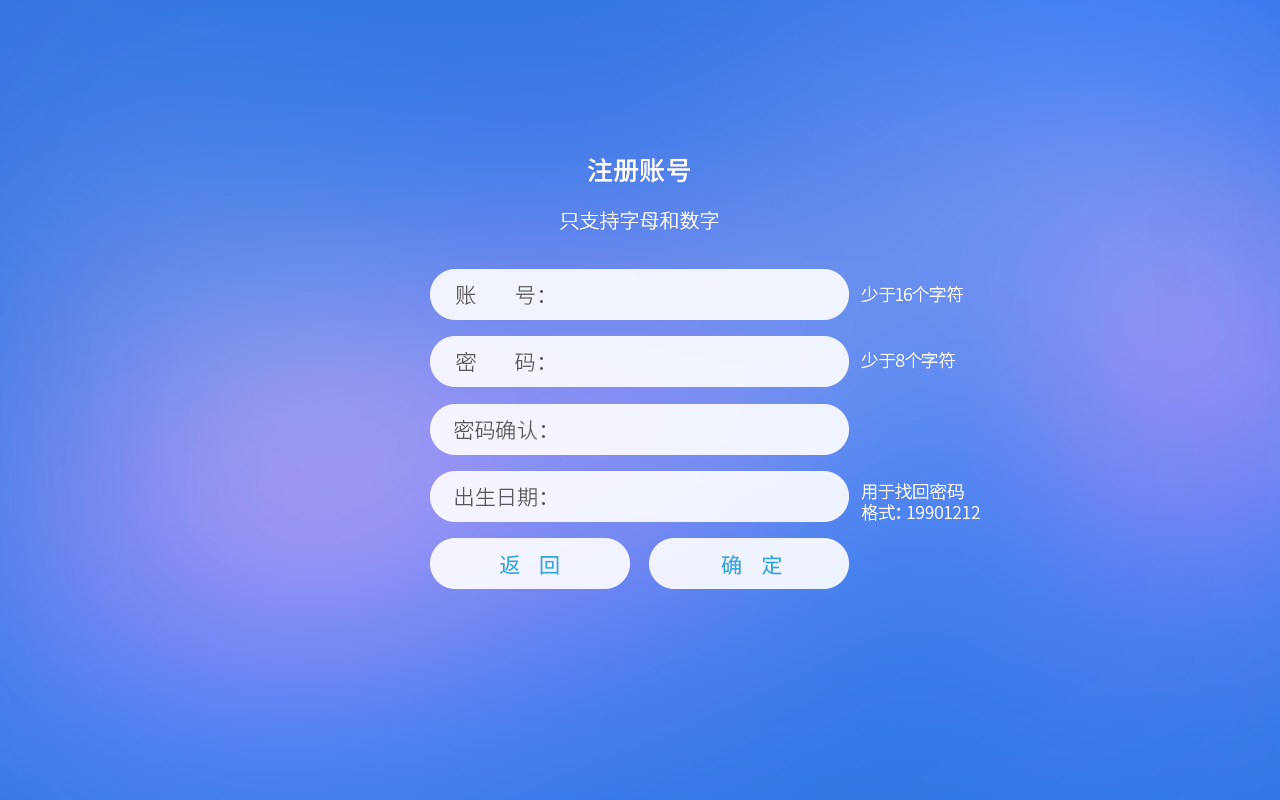
<style>
.page{position:relative;width:1280px;height:800px}
.page>*{position:absolute;margin:0}
.t1{font:20px "SourceHanSansCN-Light";color:#ffffff}
.t2{font:26.2px "SourceHanSansCN-Medium";color:#ffffff}
.t3{font:21.2px "SourceHanSansCN-Light";color:#595757}
.t4{font:17.5px "SourceHanSansCN-Light";color:#ffffff}
.t5{font:21.2px "SourceHanSansCN-Regular";color:#2ea7e0}
</style>
<div class="page">
<p class="t1" style="left:560px;top:158px;width:159px;height:72px;text-align:center"><span class="t2">注册账号<br><br></span>只支持字母和数字</p>
<p class="t3" style="left:456px;top:285px;width:87px;height:20px">账        号：</p>
<p class="t4" style="left:861px;top:286px;width:102px;height:17px">少于16个字符</p>
<p class="t3" style="left:456px;top:351px;width:87px;height:21px">密        码：</p>
<p class="t4" style="left:861px;top:352px;width:94px;height:17px">少于8个字符</p>
<p class="t3" style="left:454px;top:419px;width:91px;height:21px">密码确认：</p>
<p class="t4" style="left:861px;top:483px;width:119px;height:38px">用于找回密码<br>格式：19901212</p>
<p class="t3" style="left:455px;top:487px;width:90px;height:20px">出生日期：</p>
<p class="t5" style="left:500px;top:555px;width:59px;height:20px">返    回</p>
<p class="t5" style="left:721px;top:555px;width:61px;height:20px">确    定</p>
</div>
